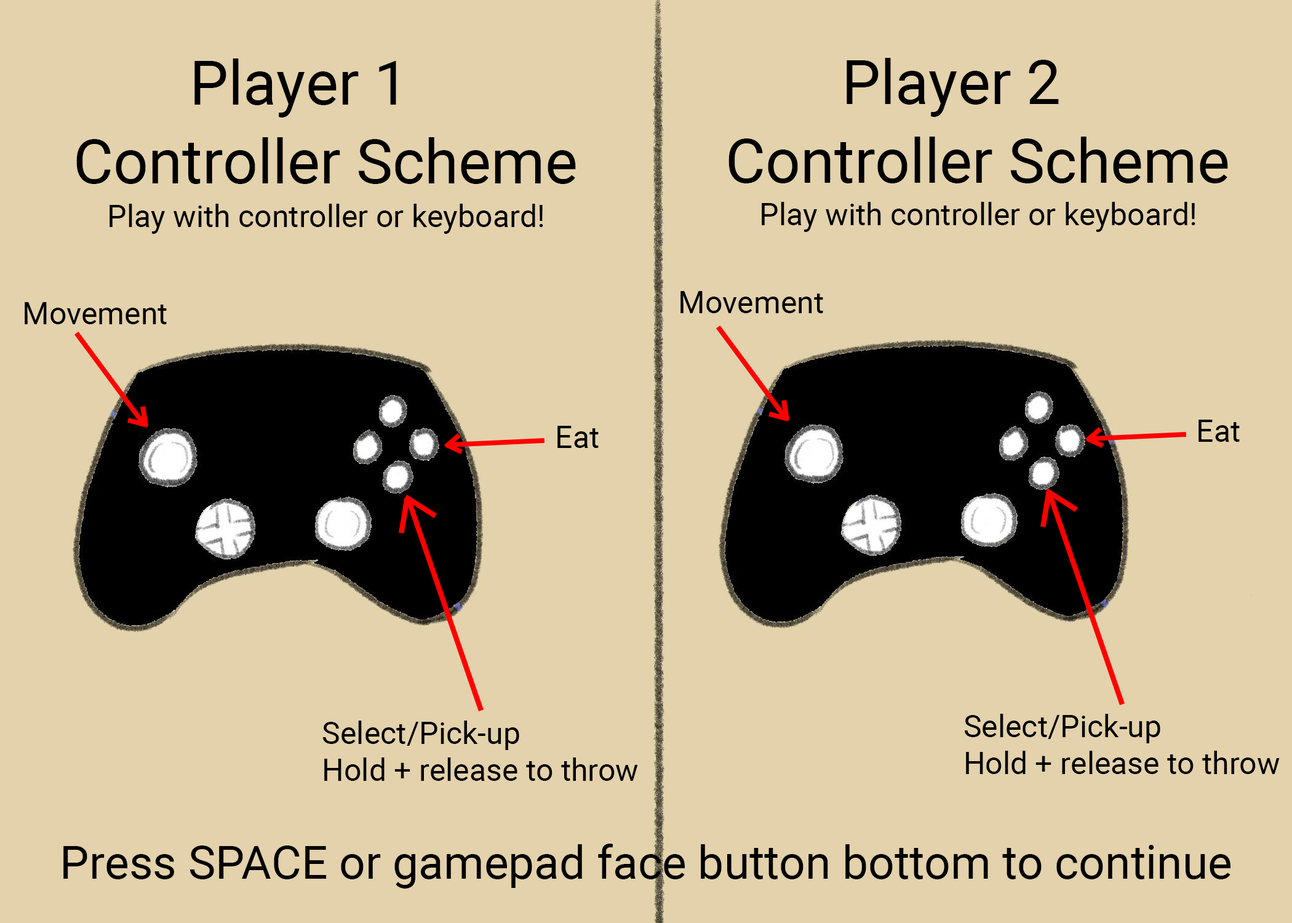
<style>
.page{position:relative;width:1292px;height:923px;background:#e3d2ac}
.page>*{position:absolute;margin:0}
.t1{font:61.5px "Roboto-Regular";color:#000000}
.t2{font:30.8px "Roboto-Regular";color:#000000}
.t3{font:46.1px "Roboto-Regular";color:#000000}
</style>
<div class="page">
<p class="t1" style="left:194px;top:58px;width:202px;height:60px">Player 1</p>
<p class="t1" style="left:847px;top:58px;width:212px;height:59px">Player 2</p>
<p class="t1" style="left:76px;top:137px;width:500px;height:47px">Controller Scheme</p>
<p class="t1" style="left:728px;top:137px;width:500px;height:46px">Controller Scheme</p>
<p class="t2" style="left:110px;top:204px;width:433px;height:30px">Play with controller or keyboard!</p>
<p class="t2" style="left:762px;top:202px;width:433px;height:30px">Play with controller or keyboard!</p>
<p class="t2" style="left:680px;top:291px;width:143px;height:22px">Movement</p>
<p class="t2" style="left:25px;top:302px;width:142px;height:22px">Movement</p>
<p class="t2" style="left:557px;top:426px;width:42px;height:22px">Eat</p>
<p class="t2" style="left:1199px;top:420px;width:41px;height:22px">Eat</p>
<p class="t2" style="left:965px;top:714px;width:315px;height:60px">Select/Pick-up<br>Hold + release to throw</p>
<p class="t2" style="left:323px;top:720px;width:315px;height:61px">Select/Pick-up<br>Hold + release to throw</p>
<p class="t3" style="left:63px;top:844px;width:1168px;height:44px">Press SPACE or gamepad face button bottom to continue</p>
</div>
